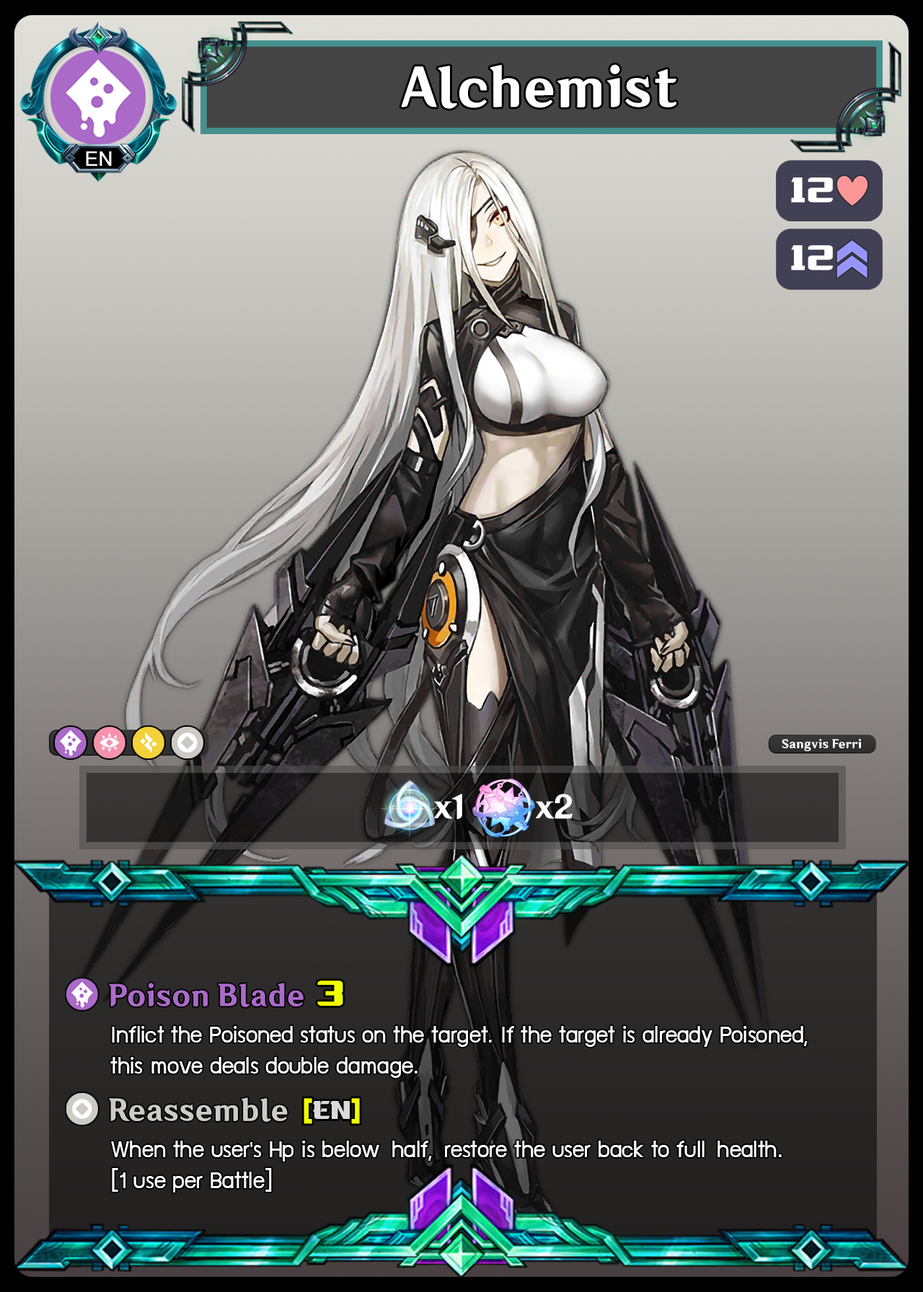
<style>
.page{position:relative;width:923px;height:1292px}
.page>*{position:absolute;margin:0}
.t1{font:51.3px "HYWenHei-HEW";color:#ffffff}
.t2{font:20.2px "ArialMT";color:#ffffff}
.t3{font:34.9px "LaOrientalBold";color:#ffffff}
.t4{font:11.3px "HYWenHei-HEW";color:#ffffff}
.t5{font:30.8px "HYWenHei-HEW";color:#ffffff}
.t6{font:28.2px "HYWenHei-HEW";color:#ab6ac8}
.t7{font:35.9px "LaOrientalBold";color:#f0ff00}
.t8{font:25.6px "supermarket";color:#ffffff}
.t9{font:28.2px "HYWenHei-HEW";color:#cecac5}
.t10{font:25.6px "LaOrientalBold";color:#dadada}
.t11{font:25.6px "LaOrientalBold";color:#f0ff00}
</style>
<div class="page">
<p class="t1" style="left:401px;top:64px;width:276px;height:45px">Alchemist</p>
<p class="t2" style="left:86px;top:151px;width:26px;height:15px">EN</p>
<p class="t3" style="left:791px;top:177px;width:42px;height:26px">12</p>
<p class="t3" style="left:791px;top:245px;width:42px;height:25px">12</p>
<p class="t4" style="left:782px;top:738px;width:79px;height:13px">Sangvis Ferri</p>
<p class="t5" style="left:434px;top:794px;width:28px;height:25px">x1</p>
<p class="t5" style="left:536px;top:794px;width:36px;height:25px">x2</p>
<p class="t6" style="left:109px;top:983px;width:195px;height:24px">Poison Blade</p>
<p class="t7" style="left:317px;top:981px;width:26px;height:25px">3</p>
<p class="t8" style="left:110px;top:1026px;width:698px;height:52px">Inflict the Poisoned status on the target. If the target is already Poisoned, <br>this move deals double damage.</p>
<p class="t9" style="left:109px;top:1097px;width:179px;height:25px">Reassemble</p>
<p class="t10" style="left:304px;top:1098px;width:56px;height:26px"><span class="t11">[</span>EN<span class="t11">]</span></p>
<p class="t8" style="left:111px;top:1141px;width:671px;height:52px">When the user's Hp is below half, restore the user back to full health.<br>[1 use per Battle]</p>
</div>
